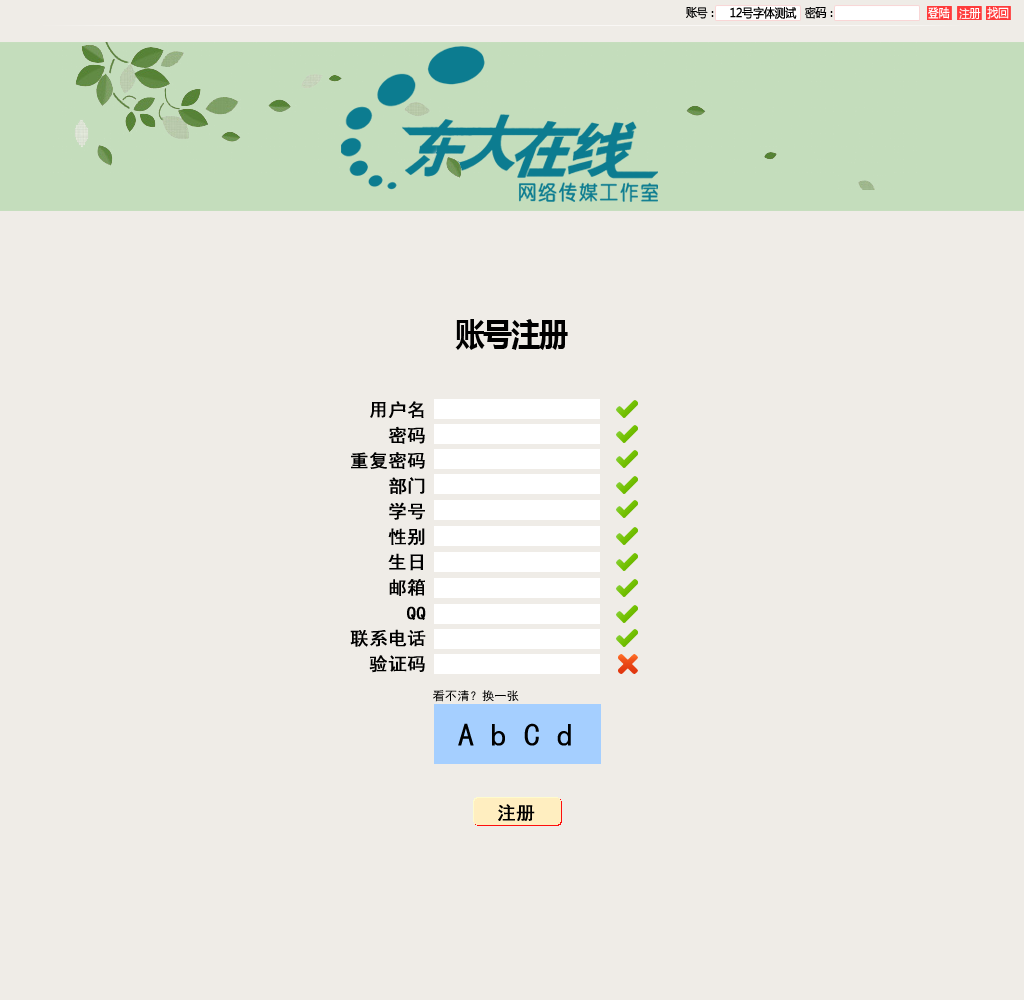
<style>
.page{position:relative;width:1024px;height:1000px;background:#efece7}
.page>*{position:absolute;margin:0}
.t1{font:12px "MicrosoftYaHei";letter-spacing:-0.04em;color:#000000;font-weight:bold;scale:0.91 1}
.t2{font:12px "MicrosoftYaHei";letter-spacing:-0.04em;color:#000000;scale:0.91 1}
.t3{font:32px "MicrosoftYaHei-Bold";letter-spacing:-0.04em;color:#000000;scale:0.91 1}
.t4{font:18px/25.4px "SimHei";color:#000000;font-weight:bold;scale:1.03 1}
.t5{font:12px "SimHei";color:#000000;scale:1.03 1}
</style>
<div class="page">
<p class="t1" style="left:730px;top:6px;width:67px;height:13px">12号字体测试</p>
<p class="t2" style="left:686px;top:7px;width:28px;height:12px">账号：</p>
<p class="t2" style="left:805px;top:7px;width:28px;height:12px">密码：</p>
<p class="t3" style="left:455px;top:319px;width:113px;height:31px">账号注册</p>
<p class="t4" style="left:350px;top:401px;width:76px;height:272px;text-align:right">用户名<br>密码<br>重复密码<br>部门<br>学号<br>性别<br>生日<br>邮箱<br>QQ<br>联系电话<br>验证码</p>
<p class="t5" style="left:433px;top:690px;width:86px;height:12px">看不清？换一张</p>
</div>
